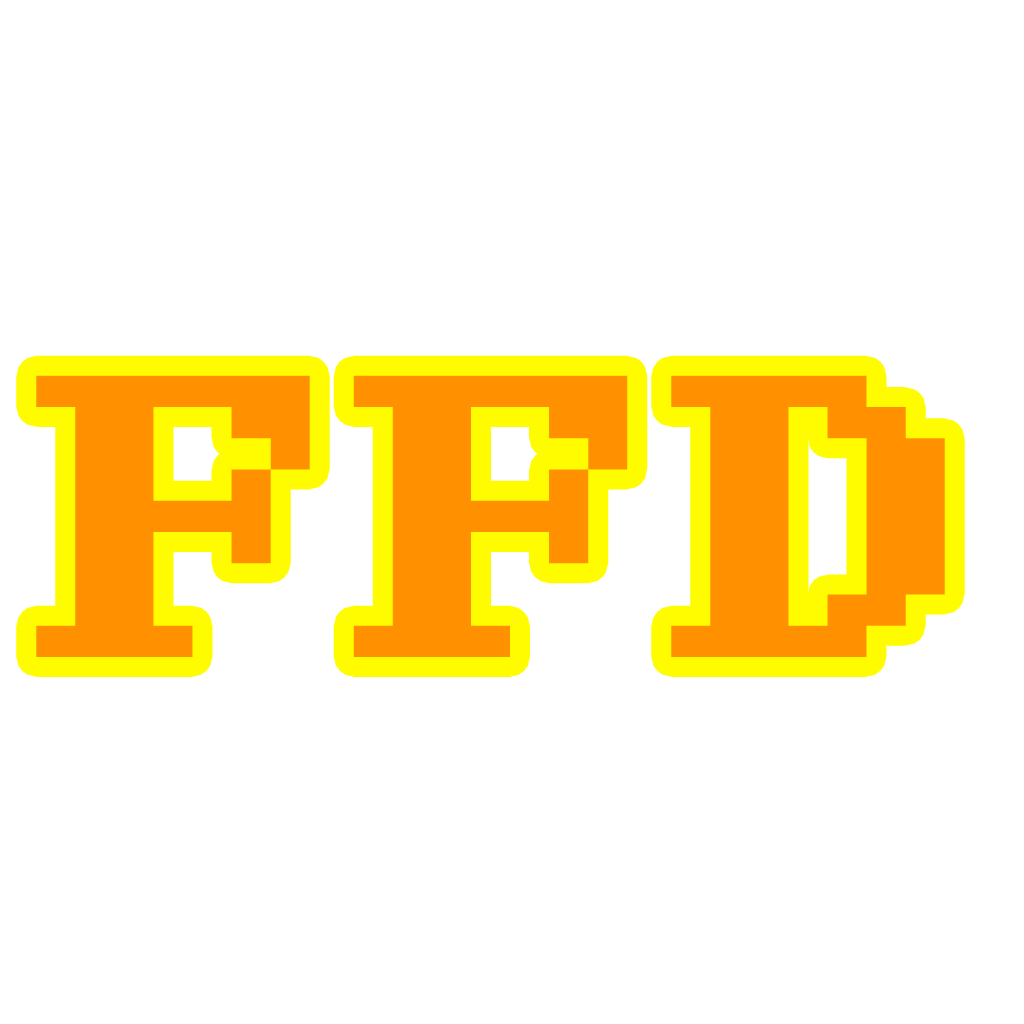
<style>
.page{position:relative;width:1024px;height:1024px;background:#ffffff}
.page>*{position:absolute;margin:0}
.t1{font:500px "Terminal";letter-spacing:0.01em;color:#ff9000}
</style>
<div class="page">
<p class="t1" style="left:36px;top:375px;width:909px;height:282px">FFD</p>
</div>
